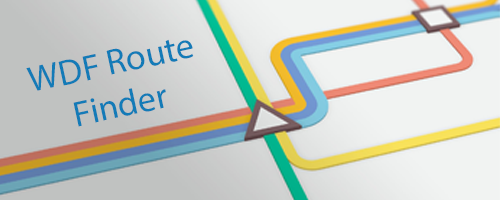
<style>
.page{position:relative;width:500px;height:200px}
.page>*{position:absolute;margin:0}
.t1{font:36px "MyriadPro-Regular";color:#137bb7}
</style>
<div class="page">
<p class="t1" style="left:26px;top:39px;width:168px;height:88px;text-align:center;rotate:-12deg">WDF Route<br>Finder</p>
</div>
